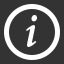
<style>
.page{position:relative;width:64px;height:64px;background:#333333}
.page>*{position:absolute;margin:0}
.t1{font:12px "AdobeDevanagari-BoldItalic";color:#ffffff}
</style>
<div class="page">
<p class="t1" style="left:26px;top:15px;width:11px;height:32px">i</p>
</div>
